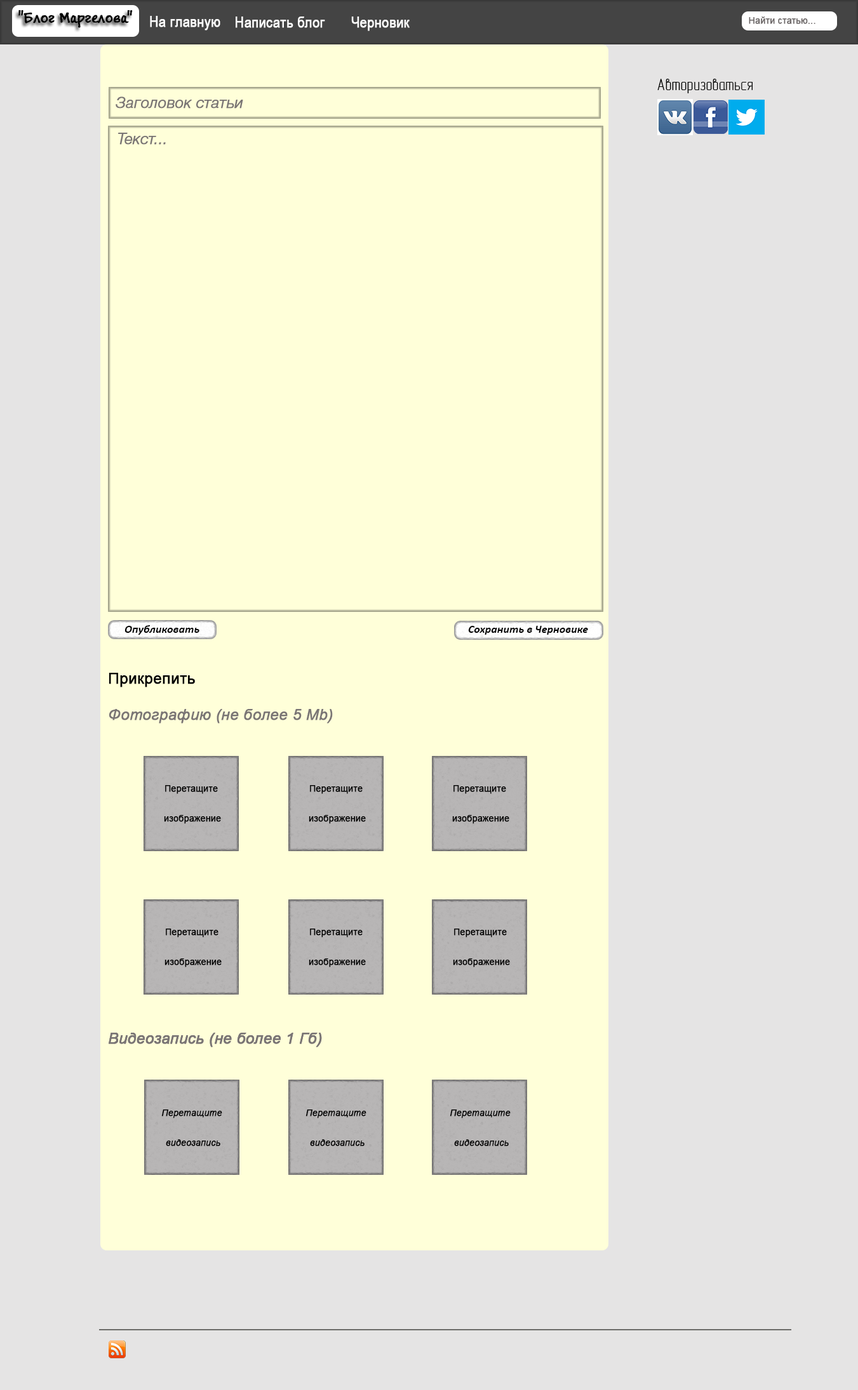
<style>
.page{position:relative;width:858px;height:1390px;background:#e5e4e4}
.page>*{position:absolute;margin:0}
.t1{font:16.5px "BuxtonSketch";color:#000000;font-weight:bold}
.t2{font:15.2px "ArialNarrow";color:#ffffff;font-weight:bold}
.t3{font:8.9px "ArialMT";color:#6b6666;font-weight:bold}
.t4{font:16.5px "GOSTypeAU";color:#000100}
.t5{font:15.2px "HelveticaNeueCyr-LightItalic";color:#7a7575;font-weight:bold}
.t6{font:11.4px "Calibri-BoldItalic";color:#010100}
.t7{font:11.4px "Calibri-BoldItalic";color:#000000}
.t8{font:15.2px "ArialMT";color:#000000;font-weight:bold}
.t9{font:15.2px "Arial-ItalicMT";color:#7a7575;font-weight:bold}
.t10{font:8.9px/29.8px "ArialMT";color:#000000;font-weight:bold}
.t11{font:7.6px/29.8px "ArialMT";color:#000000;font-weight:bold}
.t12{font:8.9px/29.8px "Arial-ItalicMT";color:#000000;font-weight:bold}
</style>
<div class="page">
<p class="t1" style="left:18px;top:10px;width:115px;height:18px">"Блог Маргелова"</p>
<p class="t2" style="left:150px;top:16px;width:70px;height:14px">На главную</p>
<p class="t2" style="left:236px;top:17px;width:89px;height:11px">Написать блог</p>
<p class="t2" style="left:351px;top:17px;width:58px;height:14px">Черновик</p>
<p class="t3" style="left:748px;top:17px;width:67px;height:7px">Найти статью...</p>
<p class="t4" style="left:657px;top:79px;width:95px;height:14px">Авторизоваться</p>
<p class="t5" style="left:116px;top:96px;width:127px;height:13px">Заголовок статьи</p>
<p class="t5" style="left:118px;top:133px;width:48px;height:12px">Текст...</p>
<p class="t6" style="left:124px;top:625px;width:75px;height:10px">Опубликовать</p>
<p class="t7" style="left:468px;top:626px;width:120px;height:9px">Сохранить в Черновике</p>
<p class="t8" style="left:109px;top:673px;width:86px;height:15px">Прикрепить</p>
<p class="t9" style="left:109px;top:709px;width:224px;height:15px">Фотографию (не более 5 Mb)</p>
<p class="t10" style="left:164px;top:785px;width:57px;height:39px;text-align:center"><span class="t11"><br></span>Перетащите <br> изображение</p>
<p class="t10" style="left:309px;top:785px;width:57px;height:39px;text-align:center"><span class="t11"><br></span>Перетащите <br> изображение</p>
<p class="t10" style="left:452px;top:785px;width:57px;height:39px;text-align:center"><span class="t11"><br></span>Перетащите <br> изображение</p>
<p class="t10" style="left:164px;top:929px;width:58px;height:39px;text-align:center"><span class="t11"><br></span>Перетащите <br> изображение</p>
<p class="t10" style="left:309px;top:929px;width:57px;height:39px;text-align:center"><span class="t11"><br></span>Перетащите <br> изображение</p>
<p class="t10" style="left:453px;top:929px;width:57px;height:39px;text-align:center"><span class="t11"><br></span>Перетащите <br> изображение</p>
<p class="t9" style="left:109px;top:1033px;width:213px;height:14px">Видеозапись (не более 1 Гб)</p>
<p class="t9" style="left:109px;top:1033px;width:213px;height:14px">Видеозапись (не более 1 Гб)</p>
<p class="t12" style="left:161px;top:1110px;width:61px;height:37px;text-align:center">Перетащите<br> видеозапись</p>
<p class="t12" style="left:305px;top:1110px;width:61px;height:37px;text-align:center">Перетащите<br> видеозапись</p>
<p class="t12" style="left:449px;top:1110px;width:61px;height:37px;text-align:center">Перетащите<br> видеозапись</p>
</div>
